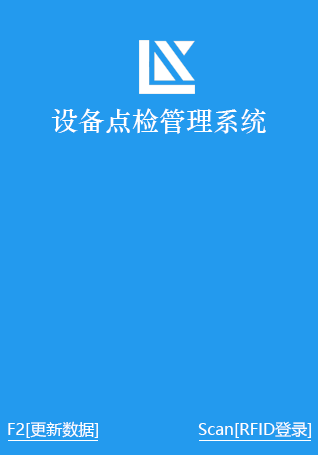
<style>
.page{position:relative;width:318px;height:455px;background:#239aee}
.page>*{position:absolute;margin:0}
.t1{font:27px "STZhongsong";color:#ffffff}
.t2{font:16px "MicrosoftYaHeiUI";color:#ffffff}
</style>
<div class="page">
<p class="t1" style="left:51px;top:108px;width:215px;height:26px">设备点检管理系统</p>
<p class="t2" style="left:8px;top:421px;width:90px;height:17px">F2[更新数据]</p>
<p class="t2" style="left:198px;top:421px;width:113px;height:17px">Scan[RFID登录]</p>
</div>
